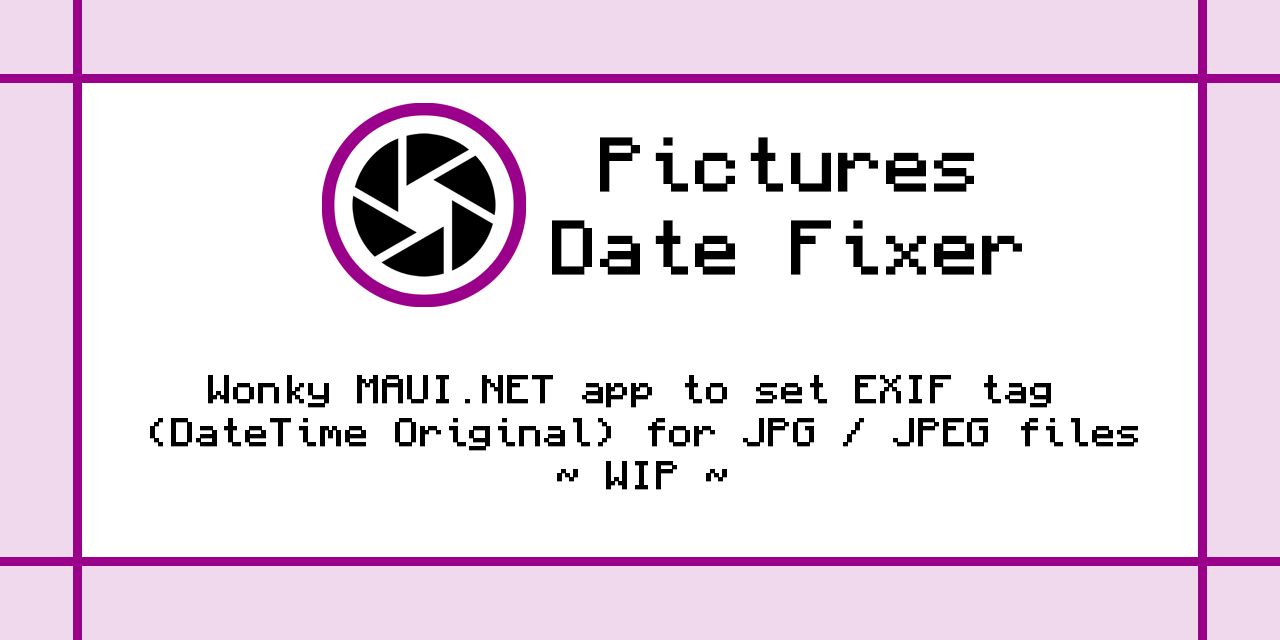
<style>
.page{position:relative;width:1280px;height:640px;background:#ffffff}
.page>*{position:absolute;margin:0}
.t1{font:69px "Monocraft";color:#000000;font-weight:bold}
.t2{font:36px "Monocraft";color:#000000;font-weight:bold}
</style>
<div class="page">
<p class="t1" style="left:552px;top:137px;width:470px;height:138px;text-align:center">Pictures<br>Date Fixer</p>
<p class="t2" style="left:150px;top:375px;width:988px;height:115px;text-align:center">Wonky MAUI.NET app to set EXIF tag <br>(DateTime Original) for JPG / JPEG files<br>~ WIP ~</p>
</div>
